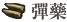
<style>
.page{position:relative;width:67px;height:22px;background:#ffffff}
.page>*{position:absolute;margin:0}
.t1{font:18px "RyuminPr6N-ExBold";color:#4b4742}
</style>
<div class="page">
<p class="t1" style="left:31px;top:2px;width:36px;height:18px">彈藥</p>
</div>
